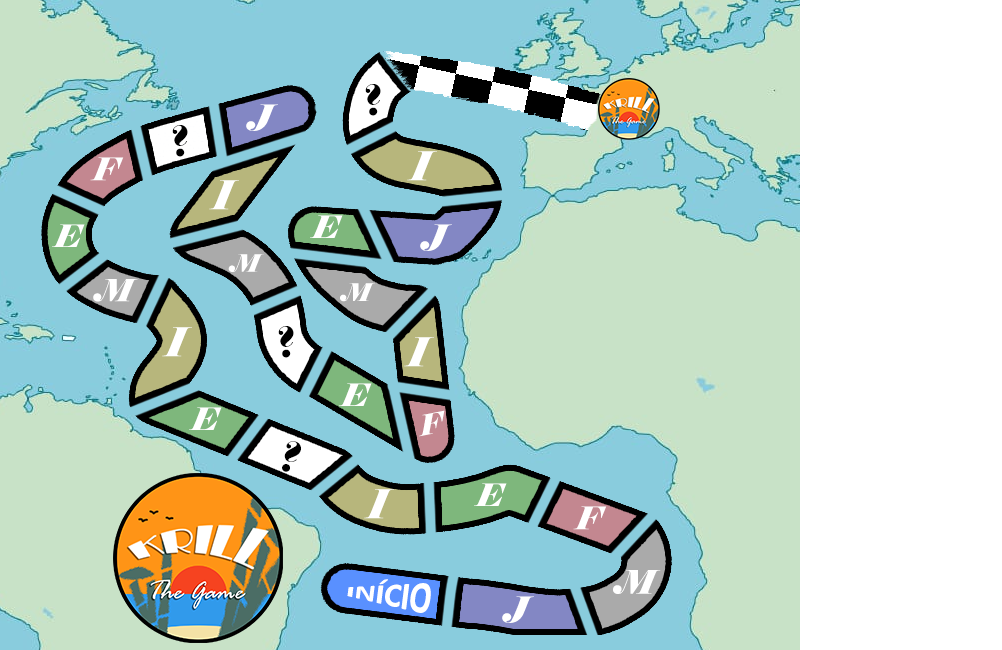
<style>
.page{position:relative;width:1002px;height:650px;background:#89ccdd}
.page>*{position:absolute;margin:0}
.t1{font:40.6px "Elephant-Italic";color:#000000}
.t2{font:36px "Elephant-Italic";color:#ffffff}
.t3{font:31.3px "Elephant-Italic";color:#ffffff}
.t4{font:39.8px "Elephant-Italic";color:#ffffff}
.t5{font:30.8px "Elephant-Italic";color:#ffffff}
.t6{font:24.1px "Elephant-Italic";color:#ffffff}
.t7{font:30.5px "Elephant-Italic";color:#ffffff}
.t8{font:24.3px "Elephant-Italic";color:#ffffff}
.t9{font:28.1px "Elephant-Italic";color:#ffffff}
.t10{font:32px "Calibri-Bold";color:#ffffff}
.t11{font:32.5px "Elephant-Italic";color:#ffffff}
</style>
<div class="page">
<p class="t1" style="left:365px;top:84px;width:16px;height:32px;rotate:-21deg">?</p>
<p class="t2" style="left:246px;top:104px;width:32px;height:27px">J</p>
<p class="t1" style="left:172px;top:125px;width:16px;height:32px;rotate:-21deg">?</p>
<p class="t3" style="left:90px;top:157px;width:34px;height:24px">F</p>
<p class="t4" style="left:407px;top:151px;width:30px;height:30px">I</p>
<p class="t4" style="left:209px;top:180px;width:30px;height:30px">I</p>
<p class="t5" style="left:310px;top:215px;width:33px;height:23px">E</p>
<p class="t5" style="left:52px;top:224px;width:33px;height:23px">E</p>
<p class="t2" style="left:420px;top:224px;width:32px;height:27px">J</p>
<p class="t6" style="left:228px;top:254px;width:36px;height:18px">M</p>
<p class="t7" style="left:93px;top:279px;width:45px;height:23px">M</p>
<p class="t8" style="left:340px;top:283px;width:35px;height:19px">M</p>
<p class="t4" style="left:162px;top:327px;width:30px;height:30px">I</p>
<p class="t1" style="left:278px;top:326px;width:16px;height:32px;rotate:-21deg">?</p>
<p class="t4" style="left:404px;top:337px;width:30px;height:30px">I</p>
<p class="t5" style="left:339px;top:383px;width:33px;height:23px">E</p>
<p class="t5" style="left:189px;top:407px;width:33px;height:23px">E</p>
<p class="t9" style="left:419px;top:410px;width:26px;height:27px;rotate:-11deg">F</p>
<p class="t1" style="left:282px;top:441px;width:19px;height:31px">?</p>
<p class="t5" style="left:474px;top:483px;width:33px;height:23px">E</p>
<p class="t4" style="left:364px;top:489px;width:30px;height:30px">I</p>
<p class="t3" style="left:573px;top:506px;width:34px;height:24px">F</p>
<p class="t10" style="left:347px;top:579px;width:84px;height:34px;rotate:7deg">INÍCIO</p>
<p class="t11" style="left:613px;top:570px;width:48px;height:24px">M</p>
<p class="t2" style="left:502px;top:596px;width:32px;height:27px">J</p>
</div>
